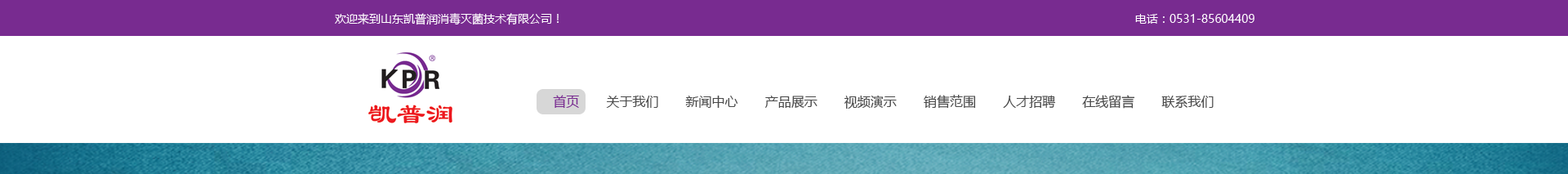
<style>
.page{position:relative;width:1568px;height:174px;background:#ffffff}
.page>*{position:absolute;margin:0}
.t1{font:11.4px "MicrosoftYaHei";color:#ffffff;text-transform:uppercase}
.t2{font:13.1px "MicrosoftYaHei";color:#4a4a4a;text-transform:uppercase}
.t3{font:13.1px "MicrosoftYaHei";color:#782b90;text-transform:uppercase}
</style>
<div class="page">
<p class="t1" style="left:335px;top:13px;width:919px;height:12px">欢迎来到山东凯普润消毒灭菌技术有限公司！                                                                                                                                                                         电话：0531-85604409</p>
<p class="t2" style="left:553px;top:95px;width:661px;height:14px"><span class="t3">首页 </span>      关于我们       新闻中心       产品展示       视频演示       销售范围       人才招聘       在线留言       联系我们</p>
</div>
